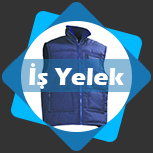
<style>
.page{position:relative;width:153px;height:153px;background:#333333}
.page>*{position:absolute;margin:0}
.t1{font:25px "ErasITC-Bold";color:#ffffff}
</style>
<div class="page">
<p class="t1" style="left:29px;top:68px;width:95px;height:17px">Is Yelek</p>
</div>
